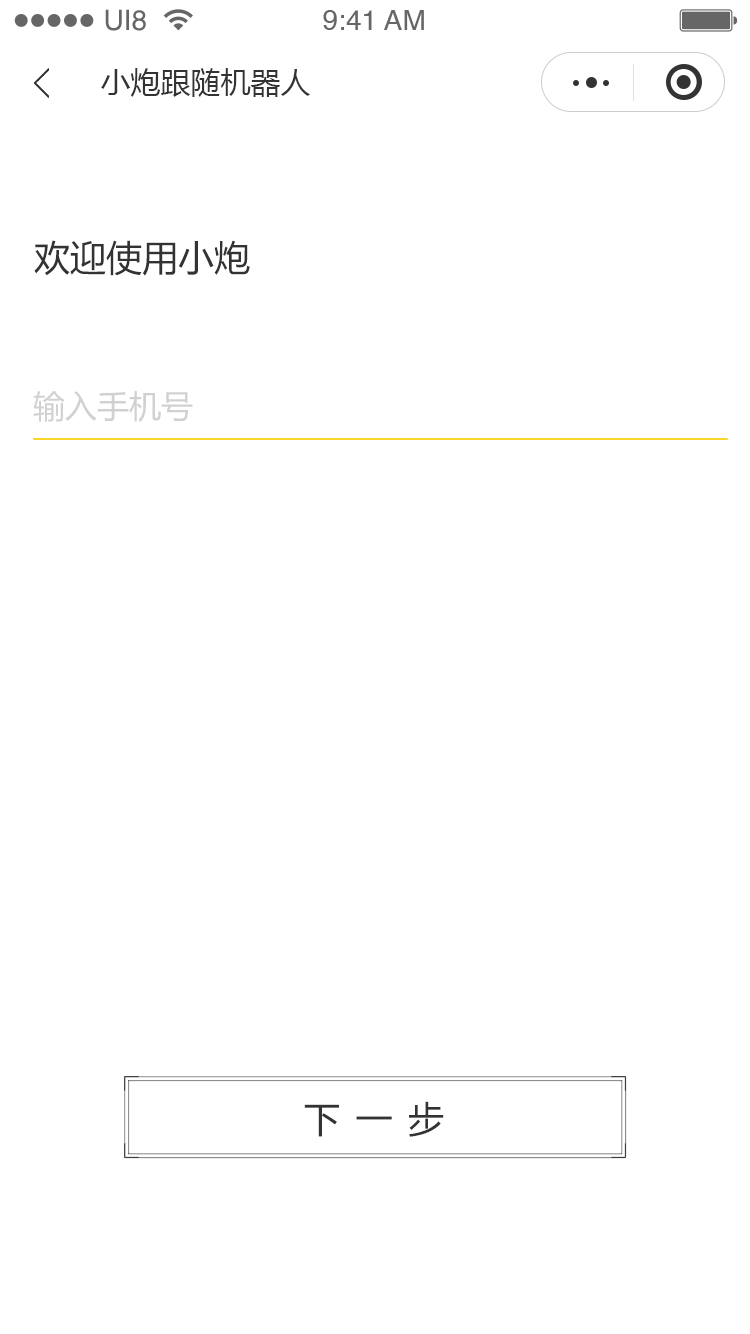
<style>
.page{position:relative;width:750px;height:1334px;background:#ffffff}
.page>*{position:absolute;margin:0}
.t1{font:28.1px "Helvetica";color:#666666}
.t2{font:30px "MicrosoftYaHei";color:#333333}
.t3{font:36px "MicrosoftYaHei";color:#333333}
.t4{font:32px "MicrosoftYaHei";color:#d1d1d1}
.t5{font:36px "MicrosoftYaHei";letter-spacing:0.44em;color:#333333}
</style>
<div class="page">
<p class="t1" style="left:105px;top:9px;width:41px;height:22px">UI8</p>
<p class="t1" style="left:323px;top:10px;width:101px;height:20px">9:41 AM</p>
<p class="t2" style="left:101px;top:68px;width:210px;height:29px">小炮跟随机器人</p>
<p class="t3" style="left:34px;top:240px;width:216px;height:36px">欢迎使用小炮</p>
<p class="t4" style="left:33px;top:391px;width:160px;height:31px">输入手机号</p>
<p class="t5" style="left:304px;top:1101px;width:140px;height:36px">下一步</p>
</div>
